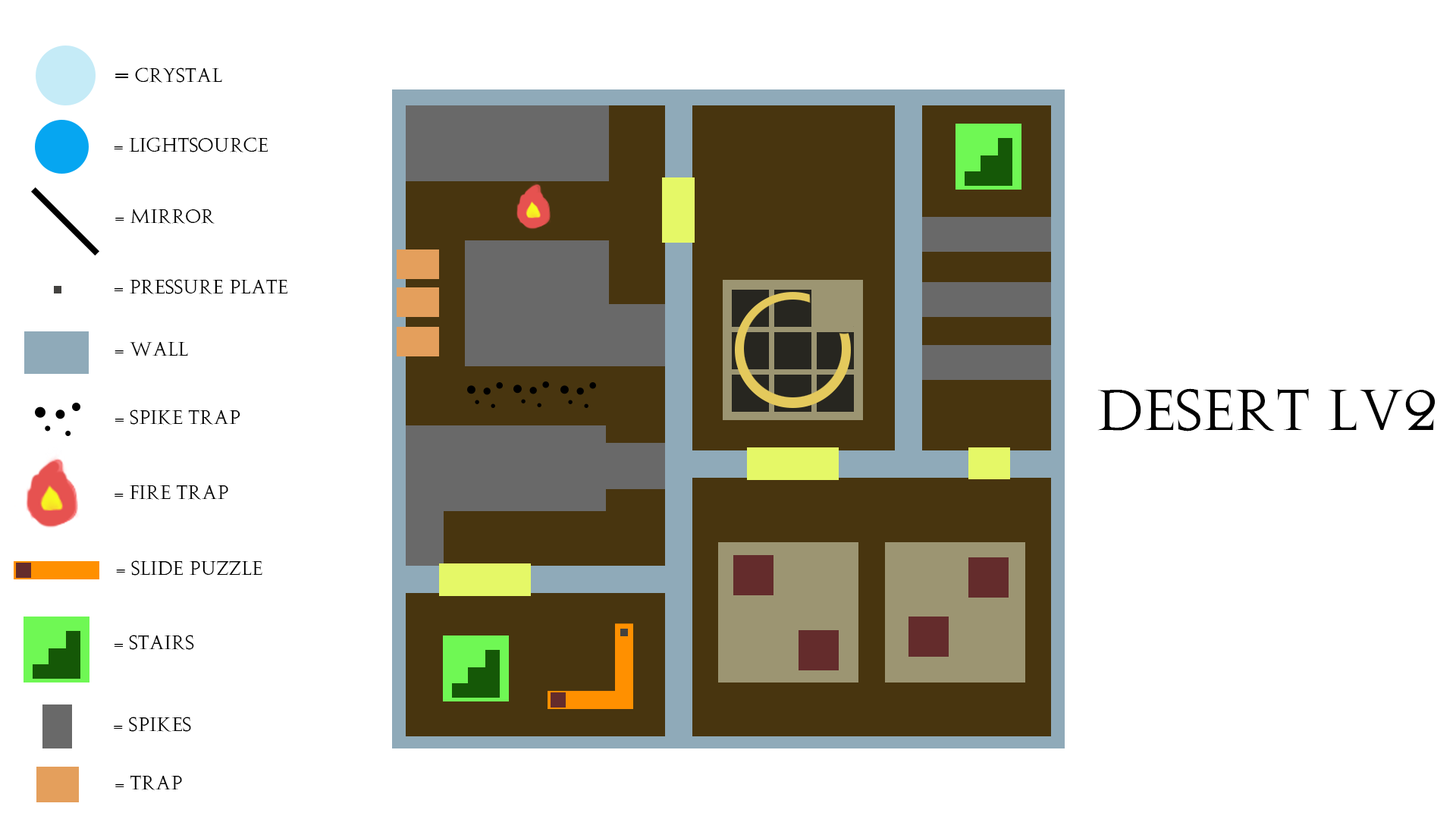
<style>
.page{position:relative;width:1456px;height:819px;background:#ffffff}
.page>*{position:absolute;margin:0}
.t1{font:18.2px "Augustus";color:#000000}
.t2{font:28.2px "Augustus";color:#000000}
.t3{font:54.6px "Augustus";color:#000000}
</style>
<div class="page">
<p class="t1" style="left:115px;top:67px;width:107px;height:16px"><span class="t2">=</span> Crystal</p>
<p class="t1" style="left:114px;top:137px;width:154px;height:15px">= lightSource</p>
<p class="t1" style="left:115px;top:209px;width:100px;height:15px">= Mirror</p>
<p class="t1" style="left:114px;top:279px;width:173px;height:15px">= Pressure plate</p>
<p class="t1" style="left:115px;top:341px;width:73px;height:15px">= Wall</p>
<p class="t3" style="left:1097px;top:388px;width:339px;height:43px">desert Lv2</p>
<p class="t1" style="left:115px;top:409px;width:125px;height:16px">= spike Trap</p>
<p class="t1" style="left:115px;top:485px;width:113px;height:15px">= fire trap</p>
<p class="t1" style="left:116px;top:560px;width:146px;height:16px">= slide puzzle</p>
<p class="t1" style="left:114px;top:635px;width:80px;height:15px">= Stairs</p>
<p class="t1" style="left:114px;top:717px;width:77px;height:15px">= Spikes</p>
<p class="t1" style="left:115px;top:775px;width:67px;height:15px">= Trap</p>
</div>
